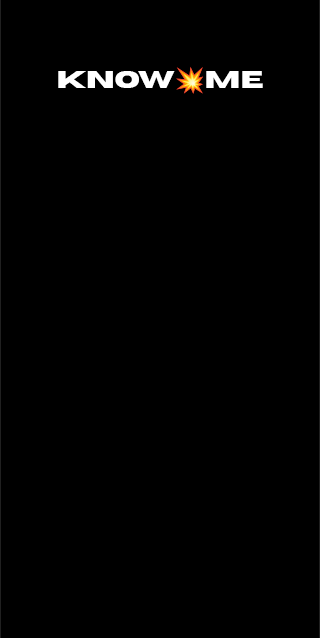
<style>
.page{position:relative;width:320px;height:638px;background:#000000}
.page>*{position:absolute;margin:0}
.t1{font:24px "Horizon-Bold";color:#ffffff}
.t2{font:24px "NotoColorEmoji-SVG";color:#ffffff}
</style>
<div class="page">
<p class="t1" style="left:58px;top:66px;width:205px;height:28px">KNOW<span class="t2">💥</span>ME</p>
</div>
